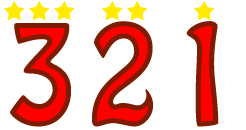
<style>
.page{position:relative;width:246px;height:130px;background:#ffffff}
.page>*{position:absolute;margin:0}
.t1{font:125px "HoboStd"}
</style>
<div class="page">
<p class="t1" style="left:10px;top:23px;width:61px;height:104px">3</p>
<p class="t1" style="left:92px;top:21px;width:61px;height:106px">2</p>
<p class="t1" style="left:186px;top:21px;width:33px;height:106px">1</p>
</div>
